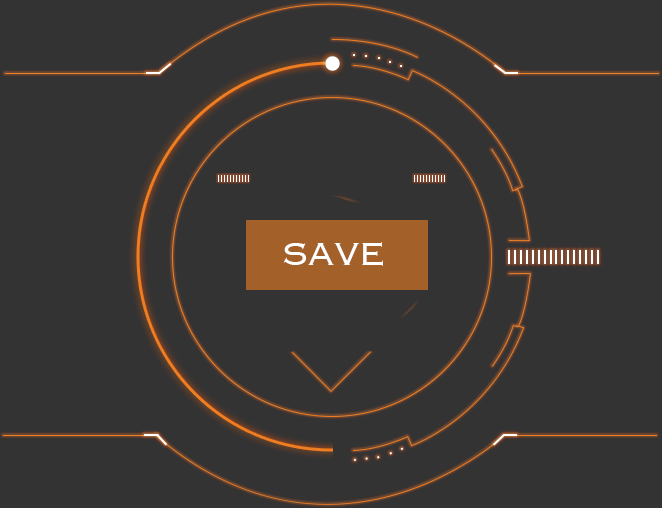
<style>
.page{position:relative;width:662px;height:508px;background:#333333}
.page>*{position:absolute;margin:0}
.t1{font:42px "Copperplate-Light";letter-spacing:-0.04em;color:#ffffff}
</style>
<div class="page">
<p class="t1" style="left:283px;top:242px;width:100px;height:24px">SAVE</p>
</div>
